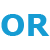
<style>
.page{position:relative;width:50px;height:50px;background:#ffffff}
.page>*{position:absolute;margin:0}
.t1{font:30px "Verdana-Bold";color:#169cd3}
</style>
<div class="page">
<p class="t1" style="left:1px;top:14px;width:49px;height:22px">OR</p>
</div>
